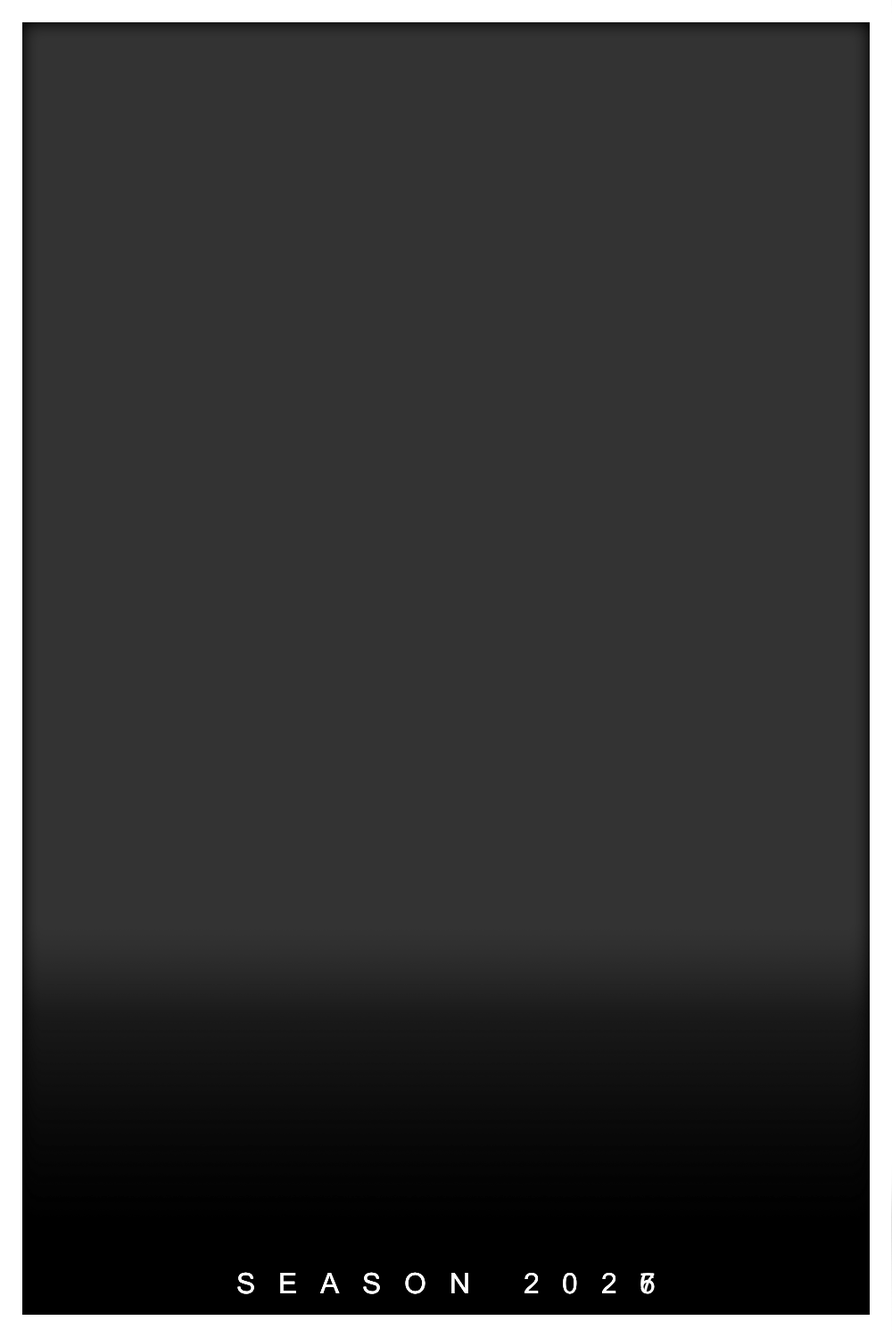
<style>
.page{position:relative;width:892px;height:1337px;background:#333333}
.page>*{position:absolute;margin:0}
.t1{font:28.5px "ArialMT";letter-spacing:0.8em;color:#ffffff}
</style>
<div class="page">
<p class="t1" style="left:237px;top:1272px;width:417px;height:23px">SEASON 2025</p>
<p class="t1" style="left:237px;top:1272px;width:417px;height:23px">SEASON 2026</p>
<p class="t1" style="left:237px;top:1272px;width:417px;height:23px">SEASON 2027</p>
</div>
